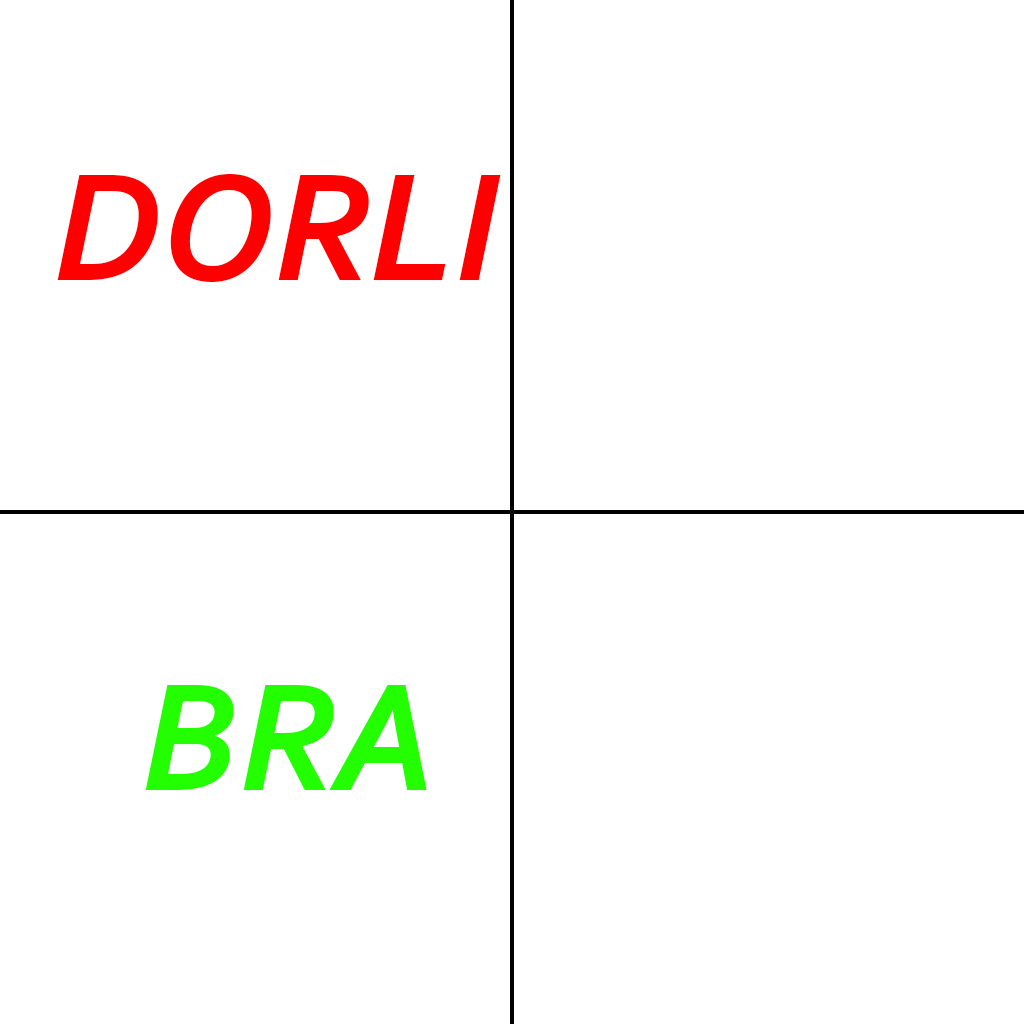
<style>
.page{position:relative;width:1024px;height:1024px;background:#ffffff}
.page>*{position:absolute;margin:0}
.t1{font:160px "Corbel-BoldItalic";color:#ff0000}
.t2{font:160px "Corbel-BoldItalic";color:#24ff00}
</style>
<div class="page">
<p class="t1" style="left:57px;top:174px;width:444px;height:108px">DORLI</p>
<p class="t2" style="left:145px;top:685px;width:282px;height:105px">BRA</p>
</div>
